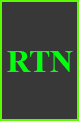
<style>
.page{position:relative;width:79px;height:121px;background:#383838}
.page>*{position:absolute;margin:0}
.t1{font:32px "TimesNewRomanPS-BoldMT";color:#03ff0f}
</style>
<div class="page">
<p class="t1" style="left:7px;top:51px;width:66px;height:21px">RTN</p>
</div>
